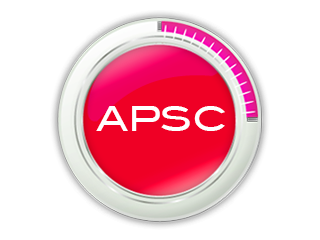
<style>
.page{position:relative;width:320px;height:240px;background:#ffffff}
.page>*{position:absolute;margin:0}
.t1{font:34px "BlairMdITCTTMedium";color:#ffffff}
</style>
<div class="page">
<p class="t1" style="left:96px;top:106px;width:129px;height:25px">APSC</p>
</div>
